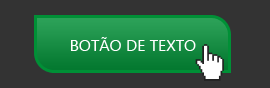
<style>
.page{position:relative;width:270px;height:88px;background:#333333}
.page>*{position:absolute;margin:0}
.t1{font:16px "Ebrima";color:#ffffff}
</style>
<div class="page">
<p class="t1" style="left:71px;top:37px;width:125px;height:14px">BOTÃO DE TEXTO</p>
</div>
